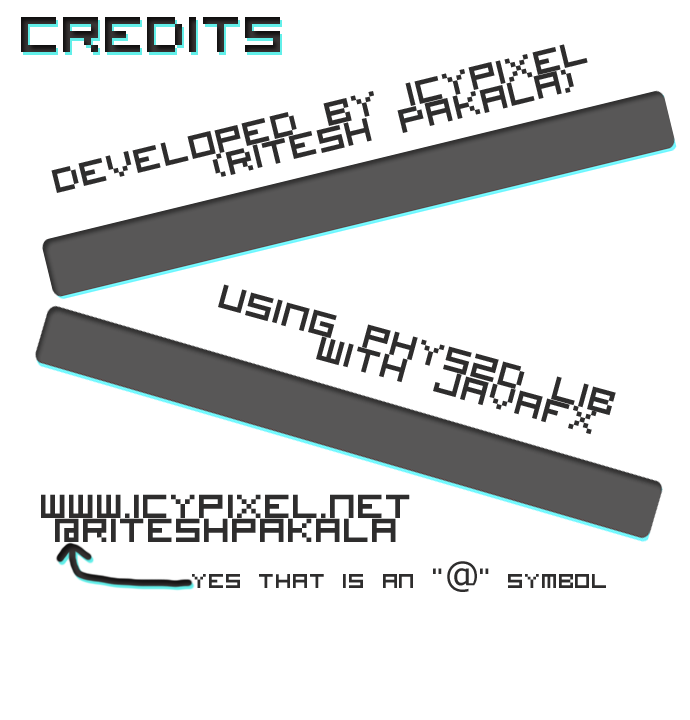
<style>
.page{position:relative;width:690px;height:720px;background:#ffffff}
.page>*{position:absolute;margin:0}
.t1{font:90px "VisitorTT2BRK";color:#2e2d2d}
.t2{font:60px/24px "VisitorTT2BRK";color:#2e2d2d}
.t3{font:36px "VisitorTT2BRK";color:#2e2d2d}
.t4{font:36px "Verdana";color:#2e2d2d}
</style>
<div class="page">
<p class="t1" style="left:21px;top:17px;width:259px;height:35px">Credits</p>
<p class="t2" style="left:51px;top:44px;width:537px;height:149px;text-align:center;rotate:-14deg">Developed by icypixel<br>        (Ritesh Pakala)</p>
<p class="t2" style="left:218px;top:284px;width:398px;height:151px;rotate:15deg">using phys2d lib<br>   with javafx</p>
<p class="t2" style="left:41px;top:494px;width:369px;height:48px;text-align:center">www.icypixel.net<br>@riteshpakala</p>
<p class="t3" style="left:192px;top:561px;width:414px;height:31px">yes that is an “<span class="t4">@</span>” symbol</p>
</div>
